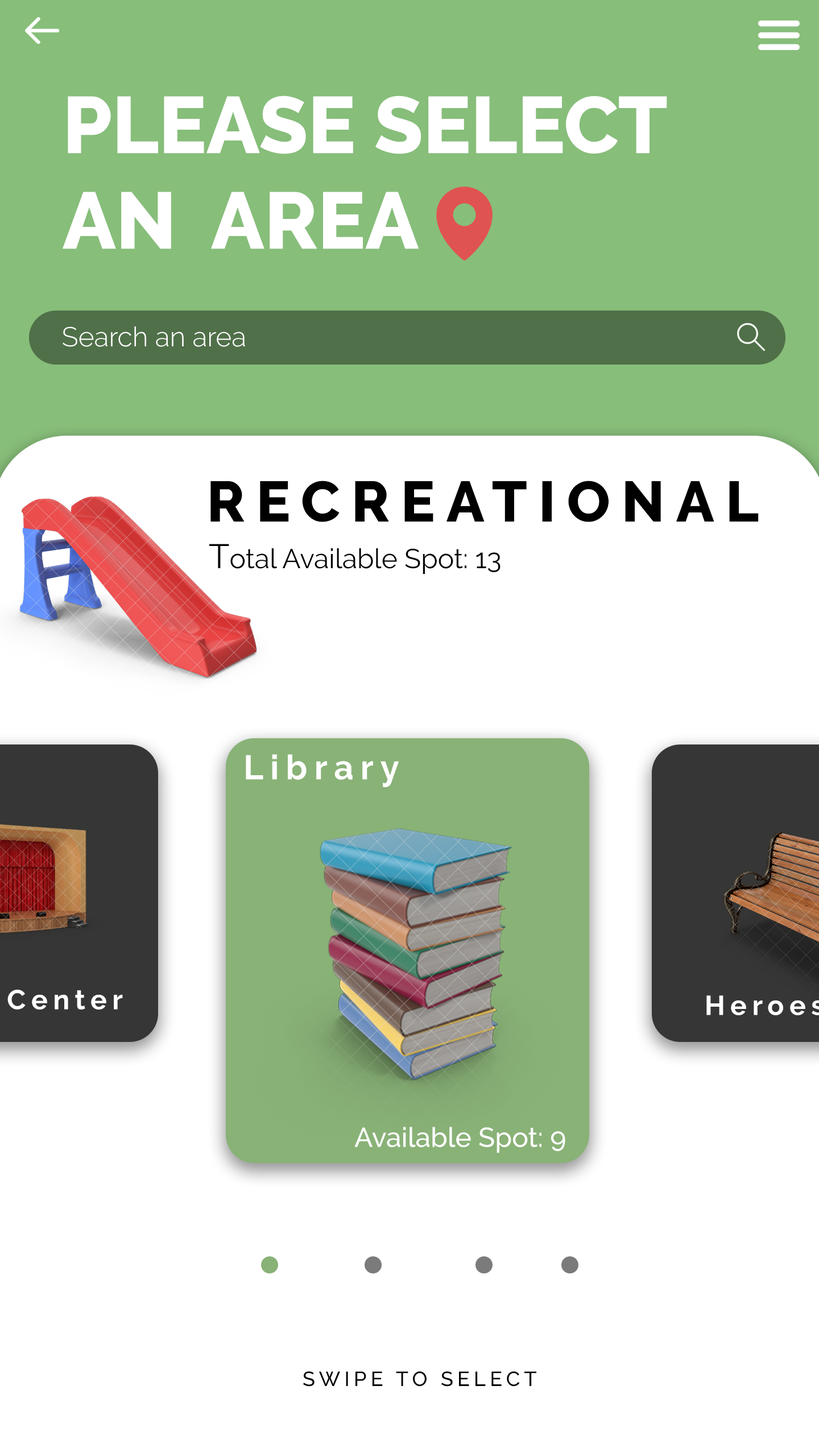
<style>
.page{position:relative;width:819px;height:1456px;background:#ffffff}
.page>*{position:absolute;margin:0}
.t1{font:79.6px "Raleway-ExtraBold";color:#ffffff}
.t2{font:27.3px "Raleway-Light";color:#ffffff}
.t3{font:56.9px "Raleway-ExtraBold";letter-spacing:0.2em;color:#000000}
.t4{font:27.3px "Raleway-Regular";color:#000000}
.t5{font:34.1px "Raleway-Regular";color:#000000}
.t6{font:34.1px "Raleway-Bold";letter-spacing:0.2em;color:#ffffff}
.t7{font:27.3px "Raleway-Medium";color:#ffffff}
.t8{font:20.5px "Raleway-Medium";letter-spacing:0.2em;color:#000000}
</style>
<div class="page">
<p class="t1" style="left:63px;top:96px;width:604px;height:153px">PLEASE SELECT <br>AN  AREA</p>
<p class="t2" style="left:63px;top:326px;width:182px;height:21px">Search an area</p>
<p class="t3" style="left:210px;top:481px;width:549px;height:41px">RECREATIONAL</p>
<p class="t4" style="left:209px;top:544px;width:291px;height:30px"><span class="t5">T</span>otal Available Spot: 13</p>
<p class="t6" style="left:246px;top:754px;width:153px;height:33px">Library</p>
<p class="t7" style="left:354px;top:1127px;width:211px;height:26px">Available Spot: 9</p>
<p class="t8" style="left:303px;top:1371px;width:233px;height:16px">SWIPE TO SELECT</p>
</div>
